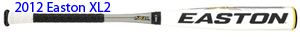
<style>
.page{position:relative;width:300px;height:37px;background:#ffffff}
.page>*{position:absolute;margin:0}
.t1{font:14px "MyriadPro-Regular";color:#0000ff}
</style>
<div class="page">
<p class="t1" style="left:15px;top:2px;width:96px;height:10px">2012 Easton XL2</p>
</div>
